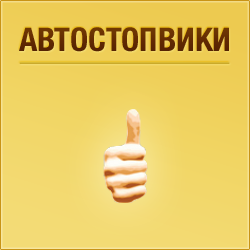
<style>
.page{position:relative;width:250px;height:250px}
.page>*{position:absolute;margin:0}
.t1{font:32.6px "HelveticaNeue-CondensedBold";color:#632b02;text-transform:uppercase}
</style>
<div class="page">
<p class="t1" style="left:19px;top:27px;width:210px;height:25px">АвтостопВики</p>
</div>
